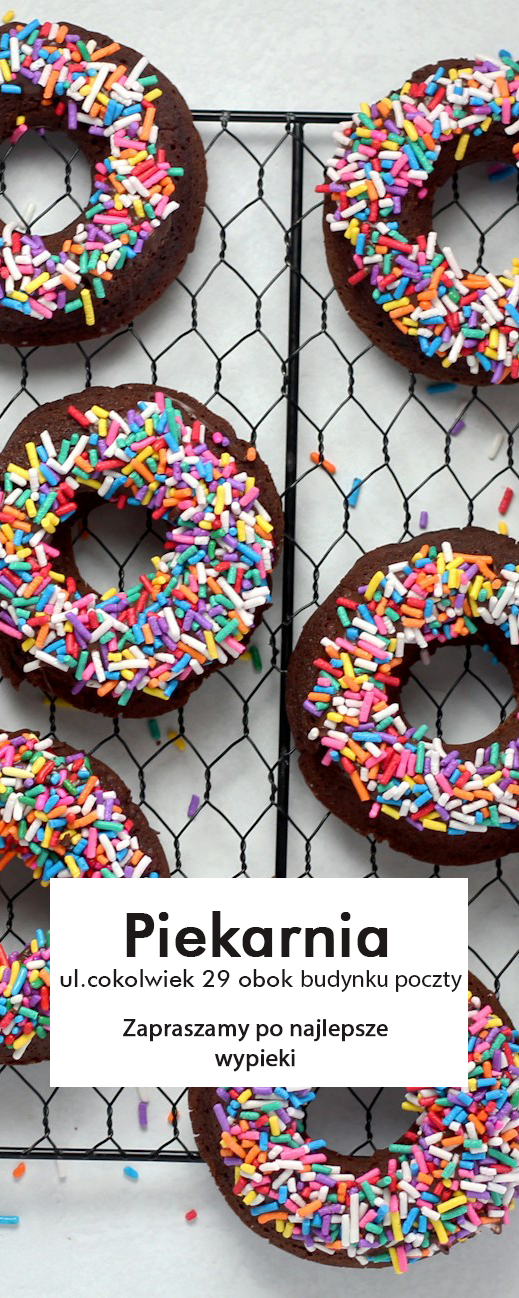
<style>
.page{position:relative;width:519px;height:1298px}
.page>*{position:absolute;margin:0}
.t1{font:60px "FuturaBT-Medium";color:#1e1919;font-weight:bold}
.t2{font:24px "FuturaBT-Medium";color:#1e1919}
.t3{font:24px "MyriadPro-Regular";color:#1e1919}
.t4{font:24px/30px "MyriadPro-Regular";color:#1e1919;font-weight:bold}
</style>
<div class="page">
<p class="t1" style="left:126px;top:911px;width:262px;height:46px">Piekarnia</p>
<p class="t2" style="left:60px;top:969px;width:402px;height:23px">ul.cokolwiek 29 obok <span class="t3">budynku poczty</span></p>
<p class="t4" style="left:123px;top:1019px;width:265px;height:53px;text-align:center">Zapraszamy po najlepsze<br>wypieki</p>
</div>
